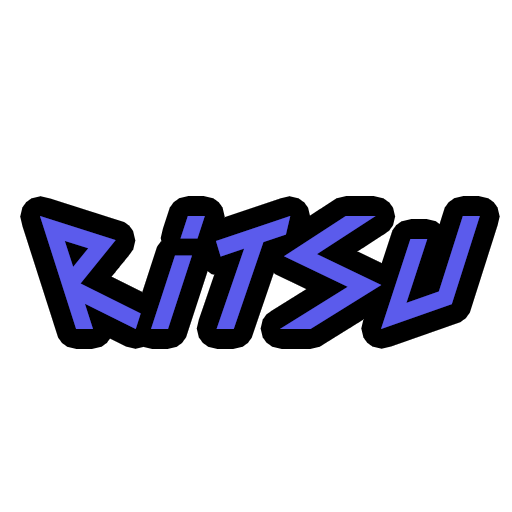
<style>
.page{position:relative;width:512px;height:512px;background:#ffffff}
.page>*{position:absolute;margin:0}
.t1{font:150px "MojiponStd-EB";color:#5b5bec}
</style>
<div class="page">
<p class="t1" style="left:40px;top:216px;width:440px;height:113px">Ritsu</p>
</div>
